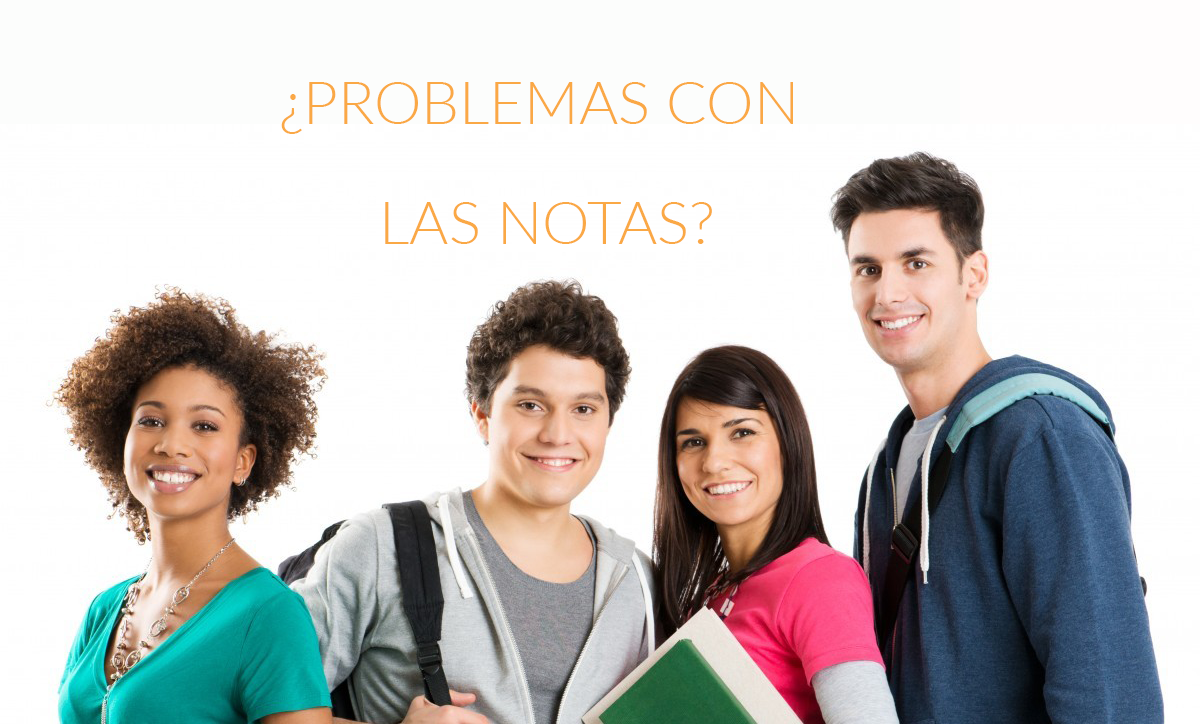
<style>
.page{position:relative;width:1200px;height:724px;background:#ffffff}
.page>*{position:absolute;margin:0}
.t1{font:60px/60px "Lato-Light";color:#faa845}
</style>
<div class="page">
<p class="t1" style="left:281px;top:82px;width:512px;height:162px;text-align:center">¿PROBLEMAS CON <br><br>LAS NOTAS?</p>
</div>
